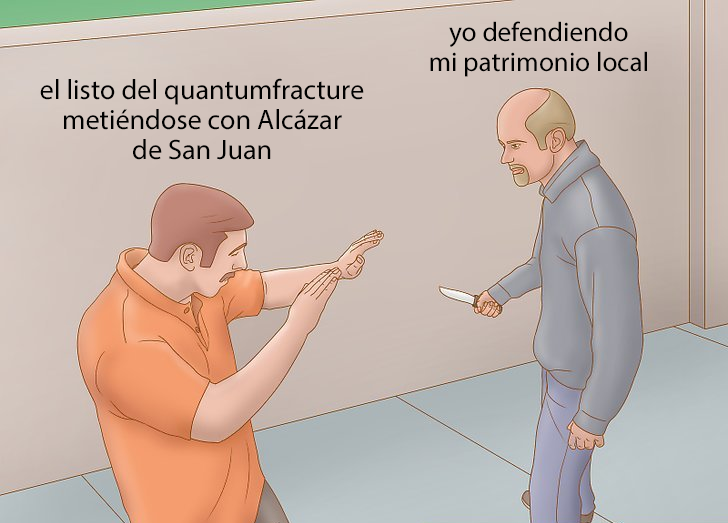
<style>
.page{position:relative;width:728px;height:523px}
.page>*{position:absolute;margin:0}
.t1{font:27.2px "MyriadPro-Regular";color:#000000}
.t2{font:28.1px "MyriadPro-Regular";color:#000000}
</style>
<div class="page">
<p class="t1" style="left:430px;top:21px;width:217px;height:56px;text-align:center">yo defendiendo<br>mi patrimonio local</p>
<p class="t2" style="left:40px;top:78px;width:324px;height:82px;text-align:center">el listo del quantumfracture<br>metiéndose con Alcázar<br>de San Juan</p>
</div>
